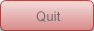
<style>
.page{position:relative;width:94px;height:31px}
.page>*{position:absolute;margin:0}
.t1{font:13.3px "ArialMT";color:#6e6e6e}
</style>
<div class="page">
<p class="t1" style="left:36px;top:11px;width:25px;height:11px">Quit</p>
</div>
